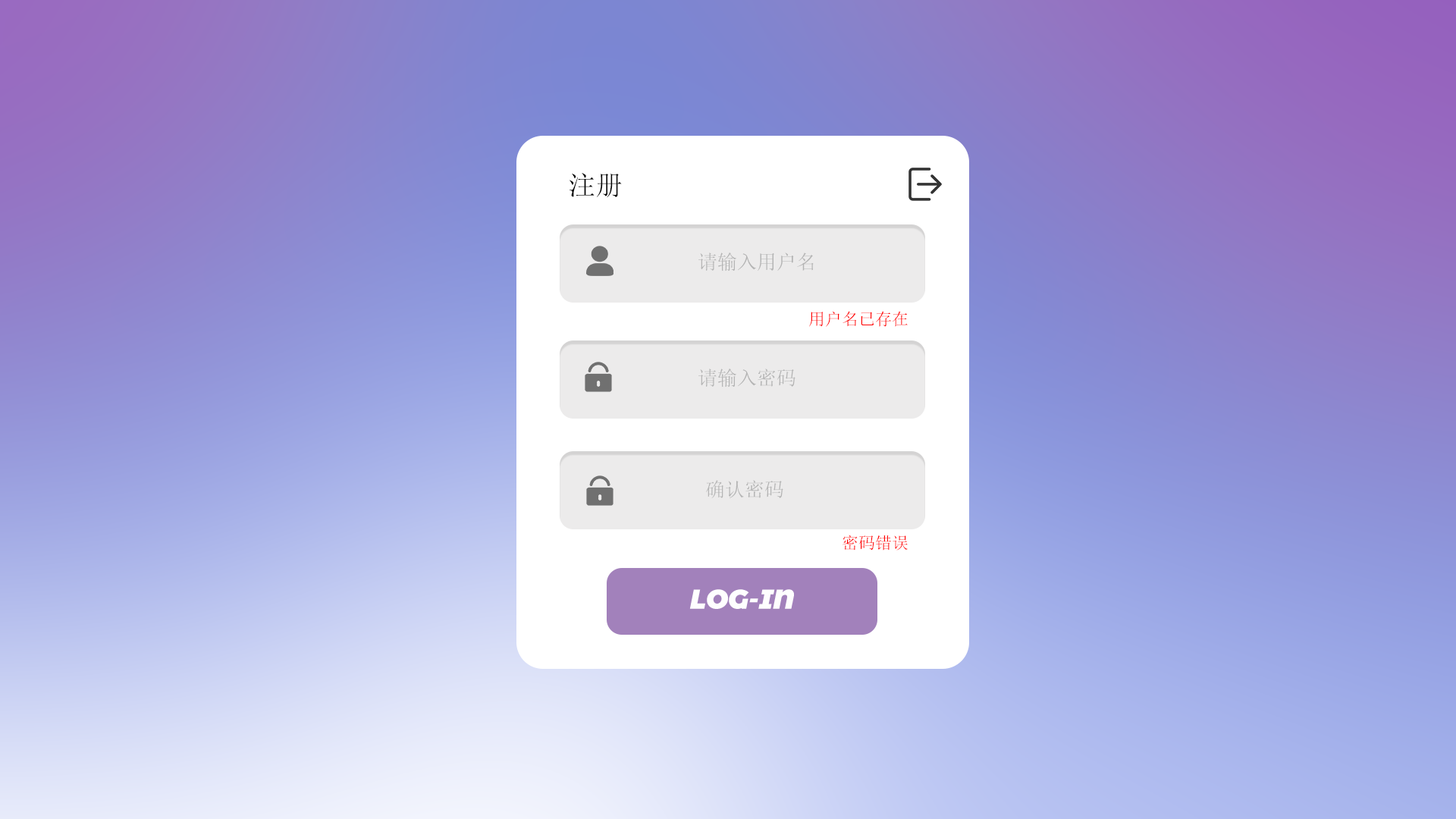
<style>
.page{position:relative;width:1456px;height:819px}
.page>*{position:absolute;margin:0}
.t1{font:27.3px "SimSun";color:#000000}
.t2{font:19.7px "SimSun";color:#b4b4b4}
.t3{font:16.7px "SimSun";color:#ff0101}
.t4{font:27.3px "MontserratAlternates-BlackItalic";color:#fefefe}
</style>
<div class="page">
<p class="t1" style="left:570px;top:173px;width:52px;height:25px">注册</p>
<p class="t2" style="left:698px;top:253px;width:116px;height:18px">请输入用户名</p>
<p class="t3" style="left:809px;top:311px;width:99px;height:16px">用户名已存在</p>
<p class="t2" style="left:698px;top:369px;width:97px;height:19px">请输入密码</p>
<p class="t2" style="left:706px;top:480px;width:77px;height:18px">确认密码</p>
<p class="t3" style="left:842px;top:535px;width:66px;height:16px">密码错误</p>
<p class="t4" style="left:689px;top:589px;width:105px;height:20px">LOG-IN</p>
</div>
